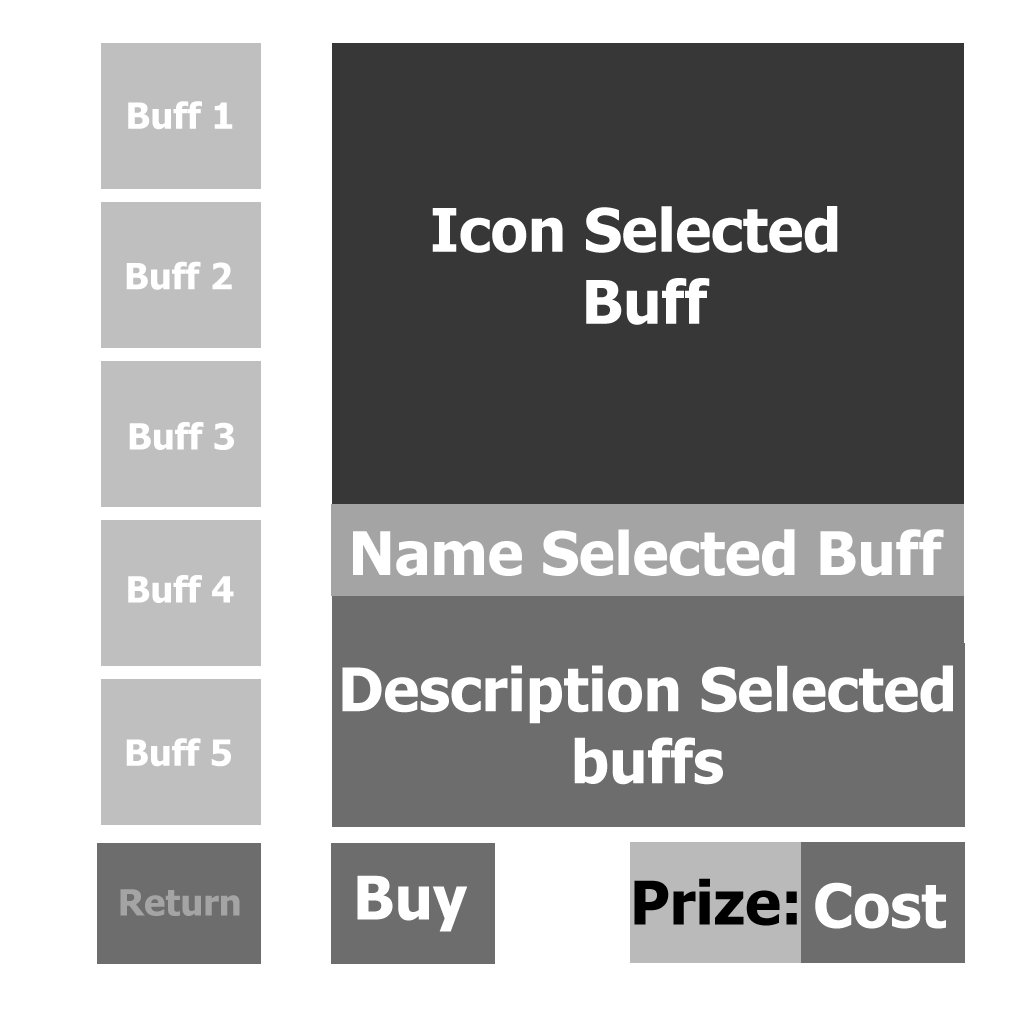
<style>
.page{position:relative;width:1028px;height:1028px;background:#ffffff}
.page>*{position:absolute;margin:0}
.t1{font:36px "Tahoma-Bold";color:#ffffff}
.t2{font:60px "Tahoma-Bold";color:#ffffff}
.t3{font:60px "Tahoma-Bold";color:#000000}
.t4{font:36px "Tahoma-Bold";color:#a4a4a4}
</style>
<div class="page">
<p class="t1" style="left:128px;top:101px;width:105px;height:29px">Buff 1</p>
<p class="t2" style="left:432px;top:206px;width:406px;height:119px;text-align:center">Icon Selected <br>Buff</p>
<p class="t1" style="left:126px;top:261px;width:106px;height:29px">Buff 2</p>
<p class="t1" style="left:129px;top:422px;width:105px;height:28px">Buff 3</p>
<p class="t2" style="left:353px;top:529px;width:591px;height:47px">Name Selected Buff</p>
<p class="t1" style="left:128px;top:575px;width:106px;height:28px">Buff 4</p>
<p class="t2" style="left:342px;top:665px;width:611px;height:120px;text-align:center">Description Selected<br>buffs</p>
<p class="t1" style="left:126px;top:738px;width:105px;height:29px">Buff 5</p>
<p class="t2" style="left:357px;top:875px;width:111px;height:57px">Buy</p>
<p class="t3" style="left:634px;top:878px;width:163px;height:48px">Prize:</p>
<p class="t4" style="left:120px;top:889px;width:120px;height:27px">Return</p>
<p class="t2" style="left:815px;top:882px;width:131px;height:47px">Cost</p>
</div>
